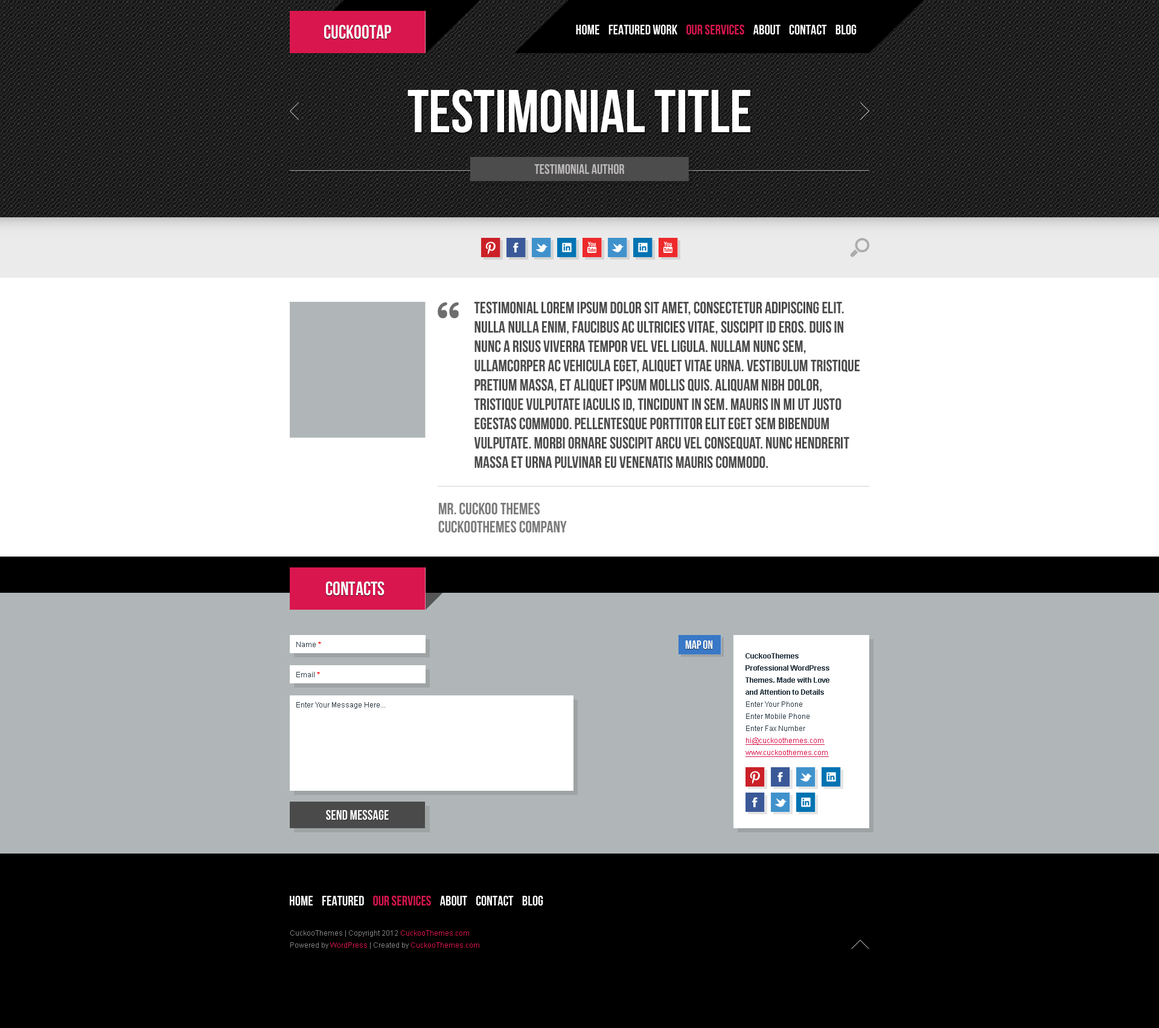
<style>
.page{position:relative;width:1159px;height:1028px;background:#ffffff}
.page>*{position:absolute;margin:0}
.t1{font:19.3px "BebasNeue";color:#ffffff}
.t2{font:13.9px "BebasNeue";color:#ffffff}
.t3{font:13.9px "BebasNeue";color:#d9164e}
.t4{font:60.4px "BebasNeue";color:#ffffff}
.t5{font:13.9px "BebasNeue";color:#bcb9b9}
.t6{font:16.3px/19.3px "BebasNeue";color:#4d4c4c}
.t7{font:16.3px/18.1px "BebasNeue";color:#7b7b7b}
.t8{font:7.2px "ArialMT";color:#303e48}
.t9{font:7.2px "ArialMT";color:#ff0000}
.t10{font:12.1px "BebasNeue";color:#ffffff}
.t11{font:7.2px/12.1px "Arial-BoldMT";color:#303e48}
.t12{font:7.2px/12.1px "ArialMT";color:#303e48}
.t13{font:7.2px/12.1px "ArialMT";color:#d9164e;text-decoration:underline}
.t14{font:7.2px/12.1px "ArialMT";color:#828282}
.t15{font:7.2px/12.1px "ArialMT";color:#d9164e}
</style>
<div class="page">
<p class="t1" style="left:324px;top:25px;width:67px;height:14px">CUCKOOTAP</p>
<p class="t2" style="left:576px;top:24px;width:281px;height:11px">HOME    FEATURED WORK    <span class="t3">OUR SERVICES    </span>ABOUT    CONTACT    BLOG</p>
<p class="t4" style="left:408px;top:89px;width:343px;height:44px">TESTIMONIAL TITLE</p>
<p class="t5" style="left:534px;top:164px;width:90px;height:11px">TESTIMONIAL AUTHOR</p>
<p class="t6" style="left:474px;top:301px;width:386px;height:168px">TESTIMONIAL Lorem ipsum dolor sit amet, consectetur adipiscing elit. Nulla nulla enim, faucibus ac ultricies vitae, suscipit id eros. Duis in nunc a risus viverra tempor vel vel ligula. Nullam nunc sem, ullamcorper ac vehicula eget, aliquet vitae urna. Vestibulum tristique pretium massa, et aliquet ipsum mollis quis. Aliquam nibh dolor, tristique vulputate iaculis id, tincidunt in sem. Mauris in mi ut justo egestas commodo. Pellentesque porttitor elit eget sem bibendum vulputate. Morbi ornare suscipit arcu vel consequat. Nunc hendrerit massa et urna pulvinar eu venenatis mauris commodo.</p>
<p class="t7" style="left:438px;top:502px;width:129px;height:31px">MR. CUCKOO THEMES<br>CUCKOOTHEMES COMPANY</p>
<p class="t1" style="left:326px;top:582px;width:59px;height:14px">CONTACTS</p>
<p class="t8" style="left:297px;top:642px;width:24px;height:5px">Name <span class="t9">*</span></p>
<p class="t10" style="left:685px;top:640px;width:28px;height:10px">MAP ON</p>
<p class="t11" style="left:746px;top:653px;width:84px;height:104px">CuckooThemes<br>Professional WordPress <br>Themes. Made with Love<br>and Attention to Details<br><span class="t12">Enter Your Phone<br>Enter Mobile Phone <br>Enter Fax Number<br></span><span class="t13">hi@cuckoothemes.com<br>www.cuckoothemes.com</span></p>
<p class="t8" style="left:297px;top:672px;width:23px;height:6px">Email <span class="t9">*</span></p>
<p class="t8" style="left:297px;top:702px;width:88px;height:7px">Enter Your Message Here...</p>
<p class="t2" style="left:326px;top:810px;width:63px;height:11px">SEND MESSAGE</p>
<p class="t2" style="left:290px;top:896px;width:254px;height:10px">HOME    FEATURED    <span class="t3">OUR SERVICES    </span>ABOUT    CONTACT    BLOG</p>
<p class="t14" style="left:290px;top:931px;width:189px;height:18px">CuckooThemes | Copyright 2012 <span class="t15">CuckooThemes.com<br></span>Powered by <span class="t15">WordPress</span> | Created by <span class="t15">CuckooThemes.com</span></p>
</div>
